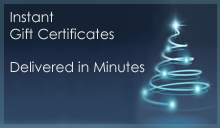
<style>
.page{position:relative;width:220px;height:128px}
.page>*{position:absolute;margin:0}
.t1{font:13.9px "CenturyGothic";color:#e6e6e6}
</style>
<div class="page">
<p class="t1" style="left:10px;top:11px;width:135px;height:62px">Instant <br>Gift Certificates<br><br>Delivered in Minutes</p>
</div>
